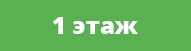
<style>
.page{position:relative;width:191px;height:51px;background:#59b151}
.page>*{position:absolute;margin:0}
.t1{font:24px "OpenSans-Extrabold";color:#ffffff}
</style>
<div class="page">
<p class="t1" style="left:53px;top:17px;width:85px;height:17px">1 этаж</p>
</div>
